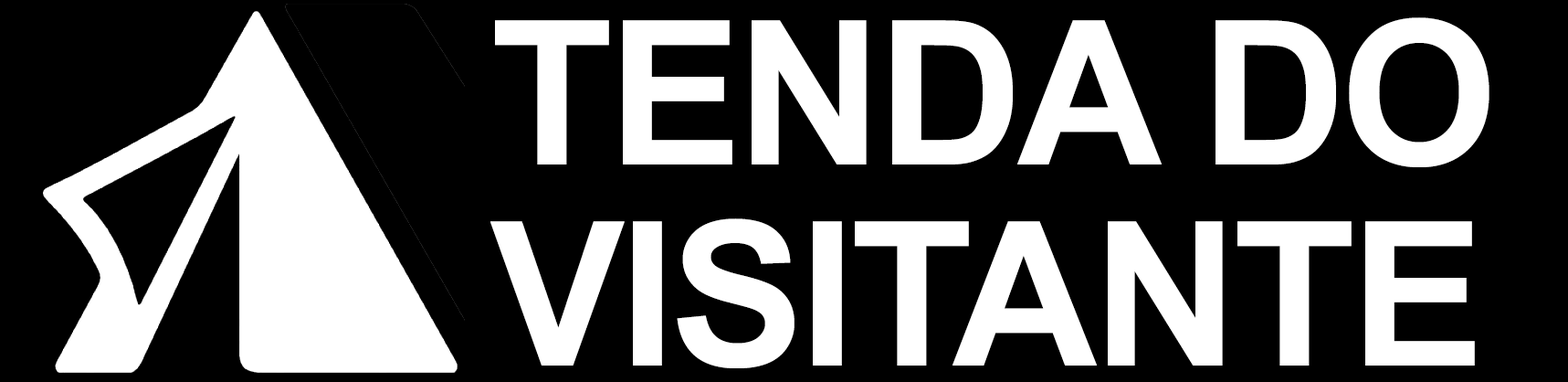
<style>
.page{position:relative;width:1568px;height:382px;background:#000000}
.page>*{position:absolute;margin:0}
.t1{font:200.9px/200.9px "Arial-BoldMT";letter-spacing:-0.025em;color:#ffffff}
</style>
<div class="page">
<p class="t1" style="left:490px;top:17px;width:999px;height:351px">TENDA DO<br>VISITANTE</p>
</div>
